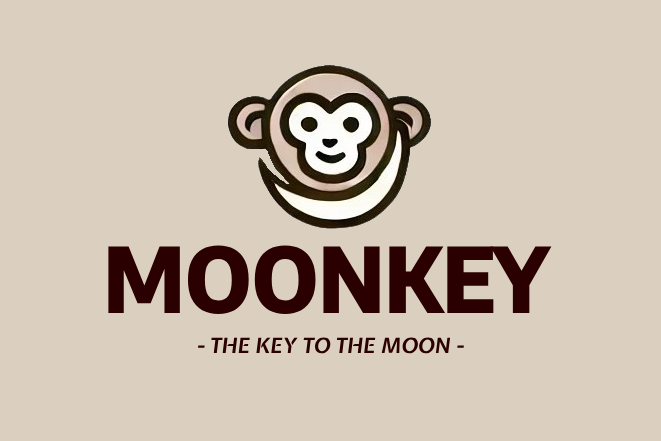
<style>
.page{position:relative;width:661px;height:441px;background:#dbcfbf}
.page>*{position:absolute;margin:0}
.t1{font:90px "EncodeSansSemiCondensed-ExtraBold";color:#2b0000}
.t2{font:21px "ExpletusSans-BoldItalic";color:#2b0000}
</style>
<div class="page">
<p class="t1" style="left:108px;top:245px;width:444px;height:69px">MOONKEY</p>
<p class="t2" style="left:198px;top:337px;width:266px;height:17px">- THE KEY TO THE MOON -</p>
</div>
